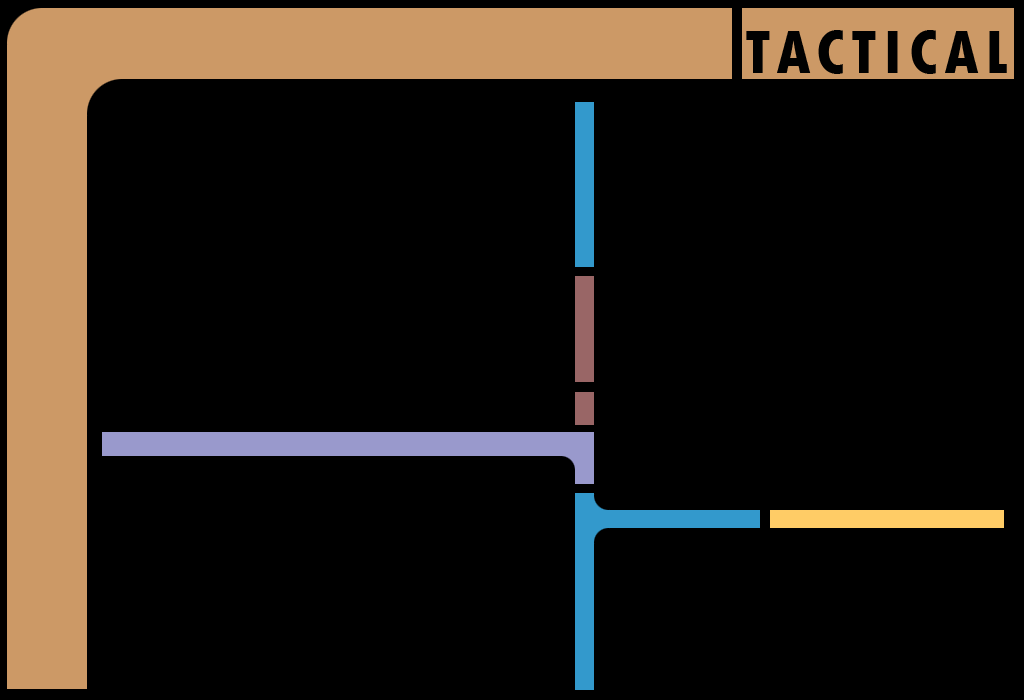
<style>
.page{position:relative;width:1024px;height:700px;background:#000000}
.page>*{position:absolute;margin:0}
.t1{font:65px "TwCenMT-CondensedExtraBold";letter-spacing:0.1em;color:#010101;text-transform:uppercase}
</style>
<div class="page">
<p class="t1" style="left:746px;top:30px;width:261px;height:44px">Tactical</p>
</div>
